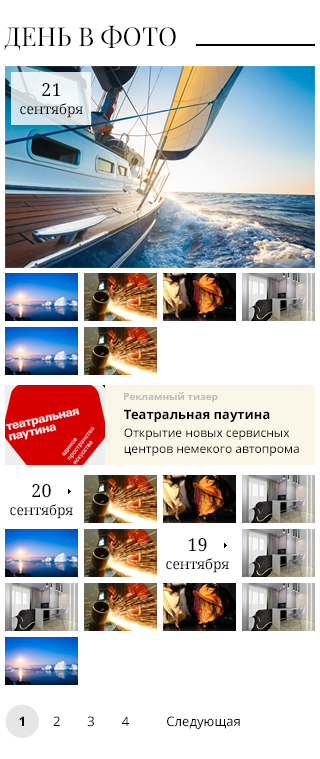
<style>
.page{position:relative;width:320px;height:759px;background:#ffffff}
.page>*{position:absolute;margin:0}
.t1{font:26px "PlayfairDisplay-Regular";color:#010101;text-transform:uppercase}
.t2{font:14px/18px "NotoSerif";color:#000000}
.t3{font:18px/24px "NotoSerif";color:#000000}
.t4{font:10px "NotoSans-Bold";color:#bebebe}
.t5{font:12px/16px "NotoSans";color:#000000}
.t6{font:13px/18px "NotoSans-Bold";color:#000000}
.t7{font:12px/18px "NotoSans";color:#000000}
.t8{font:13px "NotoSans";color:#000000}
.t9{font:13px "NotoSans-Bold";color:#000000}
</style>
<div class="page">
<p class="t1" style="left:4px;top:25px;width:172px;height:26px">День в фото</p>
<p class="t2" style="left:20px;top:83px;width:63px;height:35px;text-align:center"><span class="t3">21<br></span>сентября</p>
<p class="t4" style="left:124px;top:392px;width:94px;height:10px">Рекламный тизер</p>
<p class="t5" style="left:124px;top:409px;width:175px;height:47px"><span class="t6">Театральная паутина<br></span><span class="t7">Открытие новых сервисных <br></span>центров немекого автопрома</p>
<p class="t2" style="left:10px;top:484px;width:63px;height:35px;text-align:center"><span class="t3">20<br></span>сентября</p>
<p class="t2" style="left:166px;top:538px;width:63px;height:35px;text-align:center"><span class="t3">19<br></span>сентября</p>
<p class="t8" style="left:19px;top:716px;width:221px;height:13px"><span class="t9">1</span>        2        3        4           Следующая</p>
</div>
